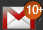
<style>
.page{position:relative;width:43px;height:30px;background:#333333}
.page>*{position:absolute;margin:0}
.t1{font:12px "TrebuchetMS";color:#ffffff}
</style>
<div class="page">
<p class="t1" style="left:27px;top:5px;width:12px;height:9px">10</p>
</div>
